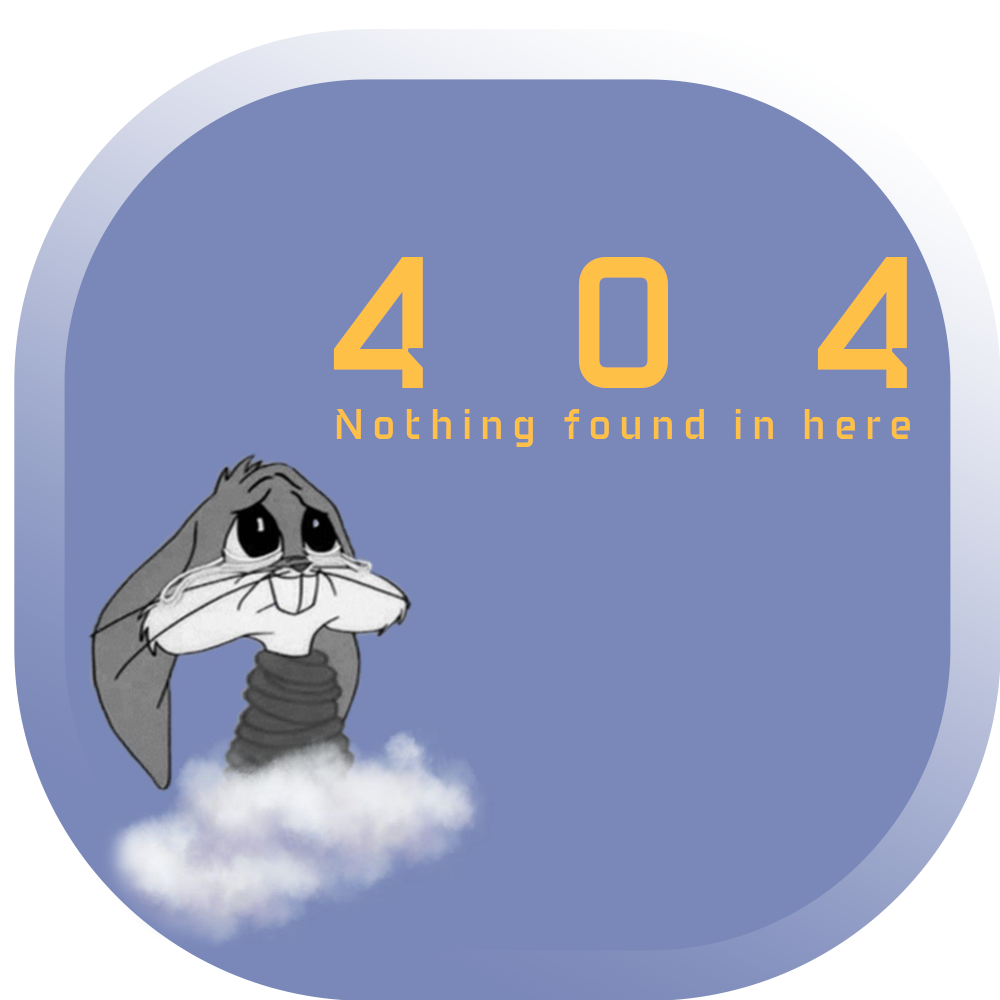
<style>
.page{position:relative;width:1000px;height:1000px;background:#7a88b9}
.page>*{position:absolute;margin:0}
.t1{font:185.4px "BF_Modernista-Regular";letter-spacing:0.7em;color:#ffc048}
.t2{font:42.3px "BF_Modernista-Regular";letter-spacing:0.2em;color:#ffc048;scale:0.96 1}
</style>
<div class="page">
<p class="t1" style="left:333px;top:257px;width:574px;height:131px">404</p>
<p class="t2" style="left:336px;top:409px;width:574px;height:38px">Nothing found in here</p>
</div>
